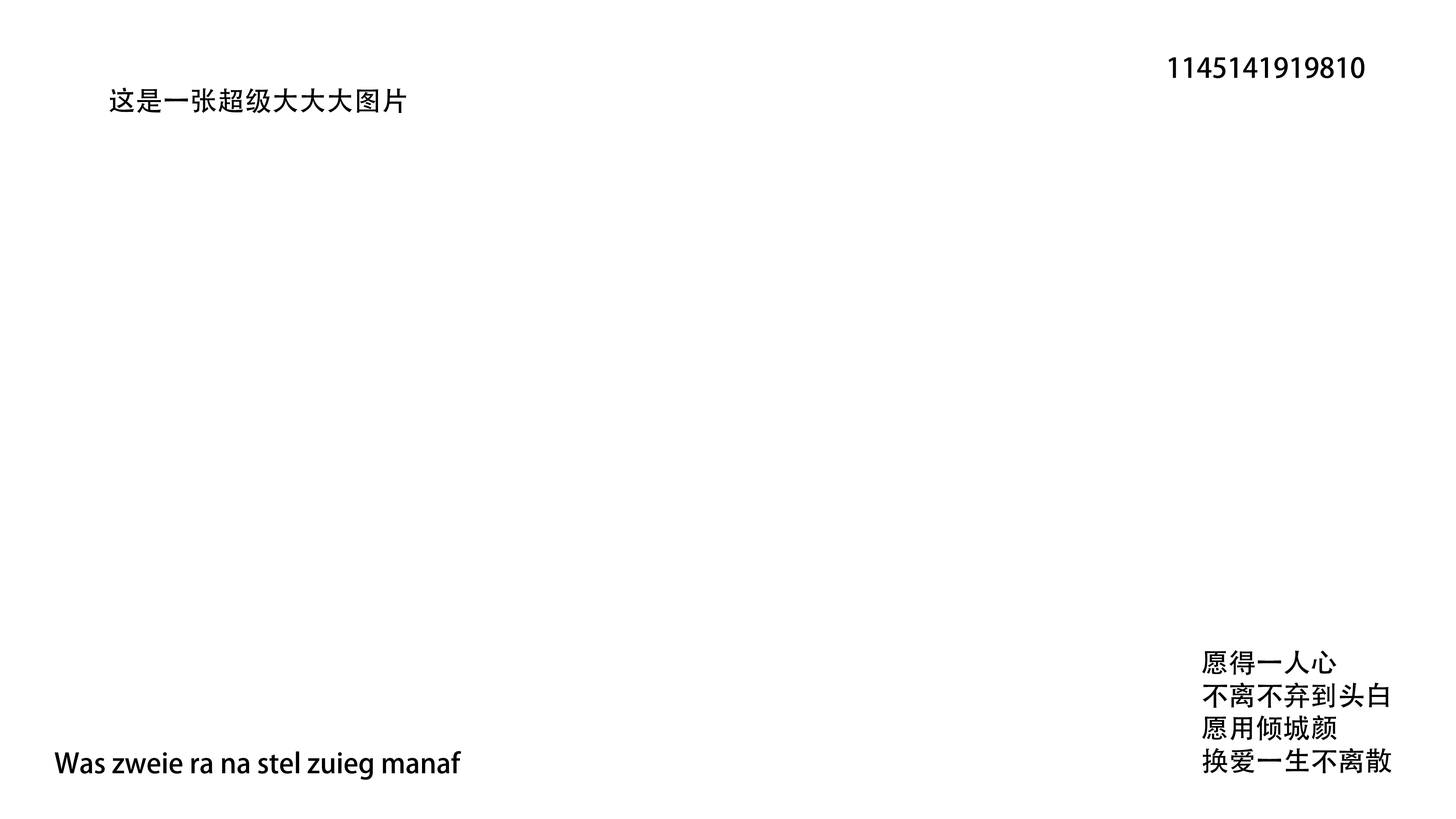
<style>
.page{position:relative;width:1456px;height:819px;background:#ffffff}
.page>*{position:absolute;margin:0}
.t1{font:27.3px "AdobeHeitiStd-Regular";color:#000000}
</style>
<div class="page">
<p class="t1" style="left:1169px;top:57px;width:196px;height:21px">1145141919810</p>
<p class="t1" style="left:110px;top:88px;width:296px;height:25px">这是一张超级大大大图片</p>
<p class="t1" style="left:1202px;top:650px;width:190px;height:123px">愿得一人心<br>不离不弃到头白<br>愿用倾城颜<br>换爱一生不离散</p>
<p class="t1" style="left:55px;top:751px;width:406px;height:29px">Was zweie ra na stel zuieg manaf</p>
</div>
